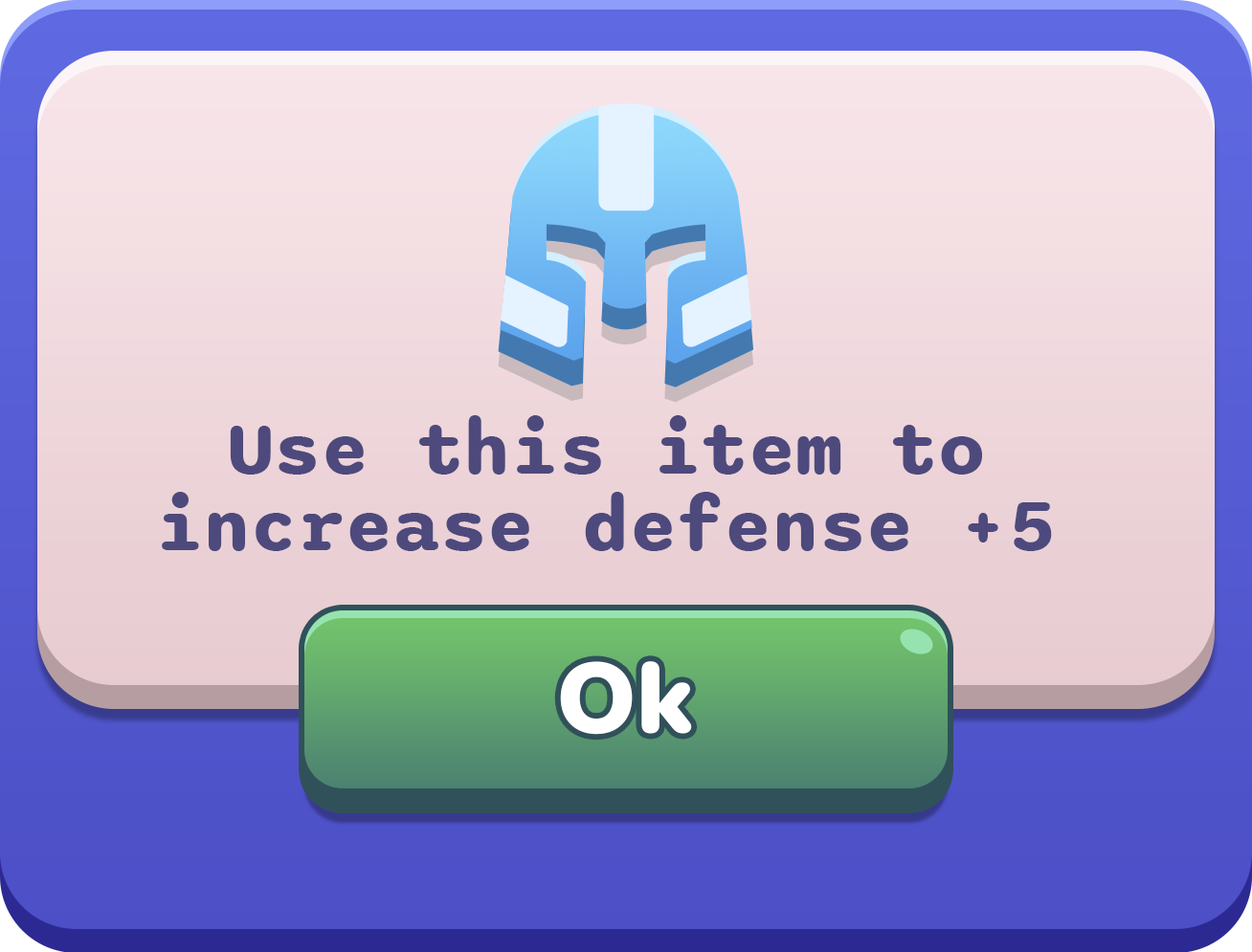
<style>
.page{position:relative;width:1252px;height:952px}
.page>*{position:absolute;margin:0}
.t1{font:76.6px/76.6px "Sono-Bold";color:#4e497c}
.t2{font:99.5px "Nunito-Black";color:#ffffff}
</style>
<div class="page">
<p class="t1" style="left:162px;top:415px;width:890px;height:136px;text-align:center">Use this item to<br>increase defense +5</p>
<p class="t2" style="left:560px;top:661px;width:132px;height:74px">Ok</p>
</div>
